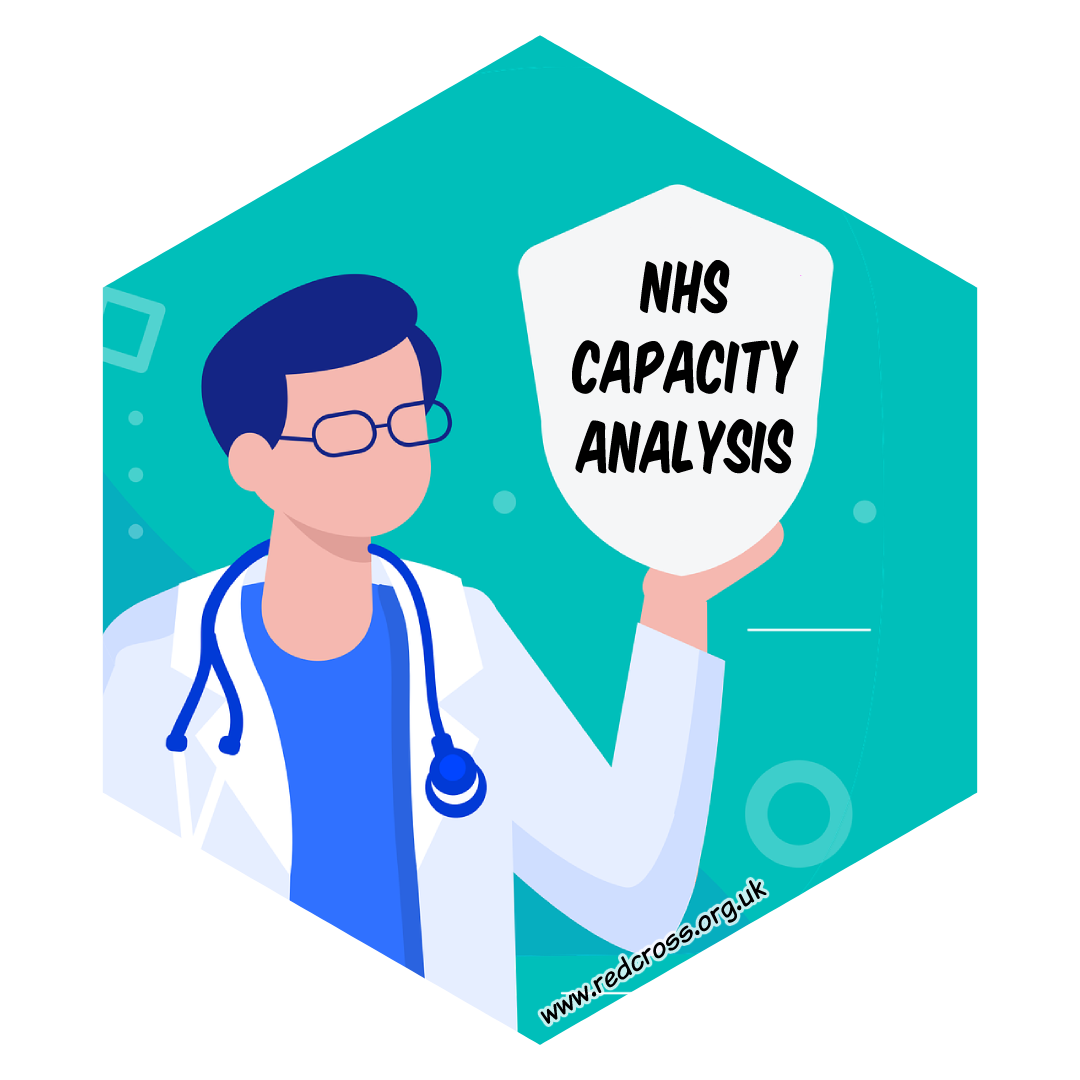
<style>
.page{position:relative;width:1080px;height:1080px;background:#ffffff}
.page>*{position:absolute;margin:0}
.t1{font:67px "KomikaTitle";color:#000000}
.t2{font:30px "KomikaText";color:#000000}
</style>
<div class="page">
<p class="t1" style="left:571px;top:259px;width:228px;height:216px;text-align:center">NHS Capacity Analysis</p>
<p class="t2" style="left:540px;top:880px;width:227px;height:144px;rotate:-31deg">www.redcross.org.uk</p>
</div>
